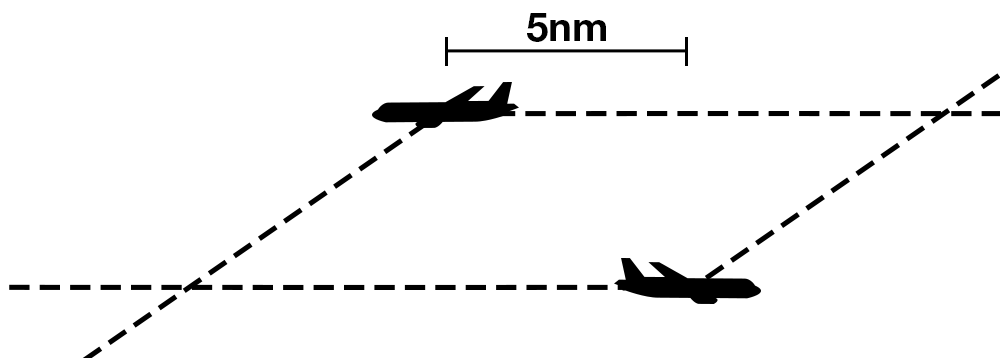
<style>
.page{position:relative;width:1000px;height:358px;background:#ffffff}
.page>*{position:absolute;margin:0}
.t1{font:40px "HelveticaNeueLTStd-Bd";color:#000000}
</style>
<div class="page">
<p class="t1" style="left:527px;top:13px;width:79px;height:29px">5nm</p>
</div>
